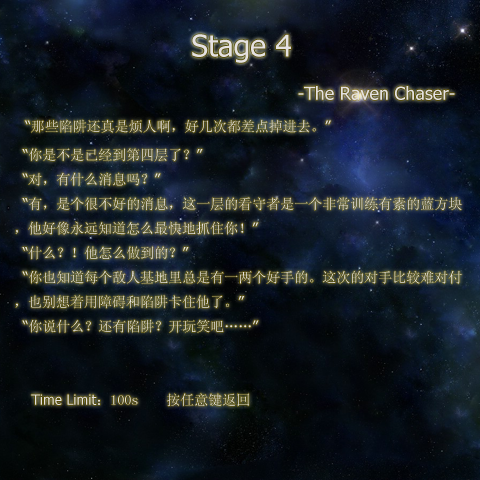
<style>
.page{position:relative;width:480px;height:480px}
.page>*{position:absolute;margin:0}
.t1{font:14px "SimSun";color:#e4e1e1}
.t2{font:24px "Tahoma";color:#e4e1e1}
.t3{font:30px "Tahoma";color:#e4e1e1}
.t4{font:18px "Tahoma";color:#e4e1e1}
.t5{font:14px "Tahoma";color:#e4e1e1}
</style>
<div class="page">
<p class="t1" style="left:15px;top:34px;width:447px;height:373px"><span class="t2"><br></span><span class="t3">Stage 4<br></span><span class="t4">                                                -The Raven Chaser-<br>  </span><span class="t5">“</span>那些陷阱还真是烦人啊，好几次都差点掉进去。<span class="t5">”<br>  “</span>你是不是已经到第四层了？<span class="t5">”<br>  “</span>对，有什么消息吗？<span class="t5">”<br>  “</span>有，是个很不好的消息，这一层的看守者是一个非常训练有素的蓝方块，他好像永远知道怎么最快地抓住你！<span class="t5">”<br>  “</span>什么？！他怎么做到的？<span class="t5">”<br>  “</span>你也知道每个敌人基地里总是有一两个好手的。这次的对手比较难对付，也别想着用障碍和陷阱卡住他了。<span class="t5">”<br>  “</span>你说什么？还有陷阱？开玩笑吧……<span class="t5">”<br><br><br>    Time Limit</span>：100s    按任意键返回</p>
</div>
